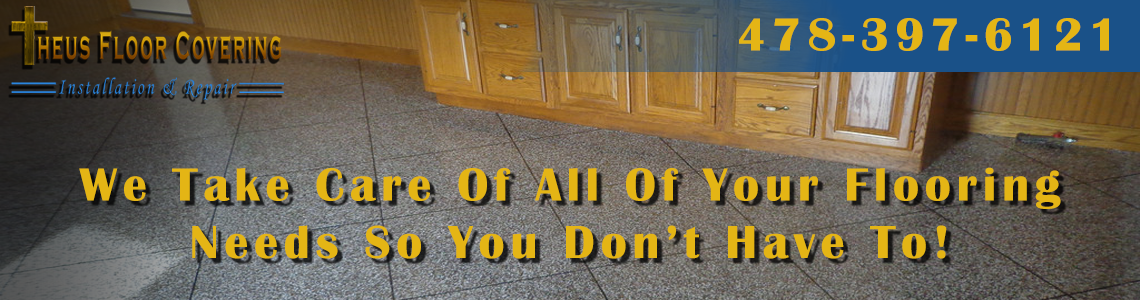
<style>
.page{position:relative;width:1140px;height:300px}
.page>*{position:absolute;margin:0}
.t1{font:48px "BritannicBold";letter-spacing:0.12em;color:#e4b515}
</style>
<div class="page">
<p class="t1" style="left:739px;top:18px;width:370px;height:33px">478-397-6121</p>
<p class="t1" style="left:79px;top:167px;width:982px;height:92px;text-align:center">We Take Care Of All Of Your Flooring<br>Needs So You Don’t Have To!</p>
</div>
